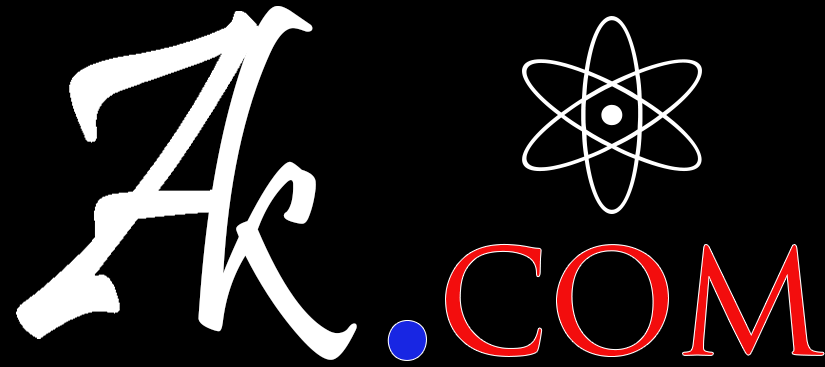
<style>
.page{position:relative;width:825px;height:367px;background:#000000}
.page>*{position:absolute;margin:0}
.t1{font:382.2px "Pristina-Regular";color:#ffffff;scale:0.95 1}
.t2{font:167.9px "TrajanPro-Regular";color:#f30d0d;scale:0.95 1}
.t3{font:354.9px "TrajanPro-Regular";color:#1826e3;scale:0.95 1}
</style>
<div class="page">
<p class="t1" style="left:198px;top:6px;width:159px;height:354px;rotate:-6deg">k</p>
<p class="t2" style="left:446px;top:244px;width:378px;height:112px">com</p>
<p class="t3" style="left:388px;top:320px;width:38px;height:40px">.</p>
</div>
